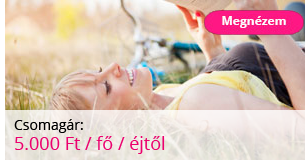
<style>
.page{position:relative;width:305px;height:160px}
.page>*{position:absolute;margin:0}
.t1{font:18px/20px "OpenSans";color:#ec006e}
.t2{font:14px/20px "OpenSans";color:#000000}
</style>
<div class="page">
<p class="t1" style="left:14px;top:119px;width:151px;height:35px"><span class="t2">Csomagár: <br></span>5.000 Ft / fő / éjtől</p>
</div>
